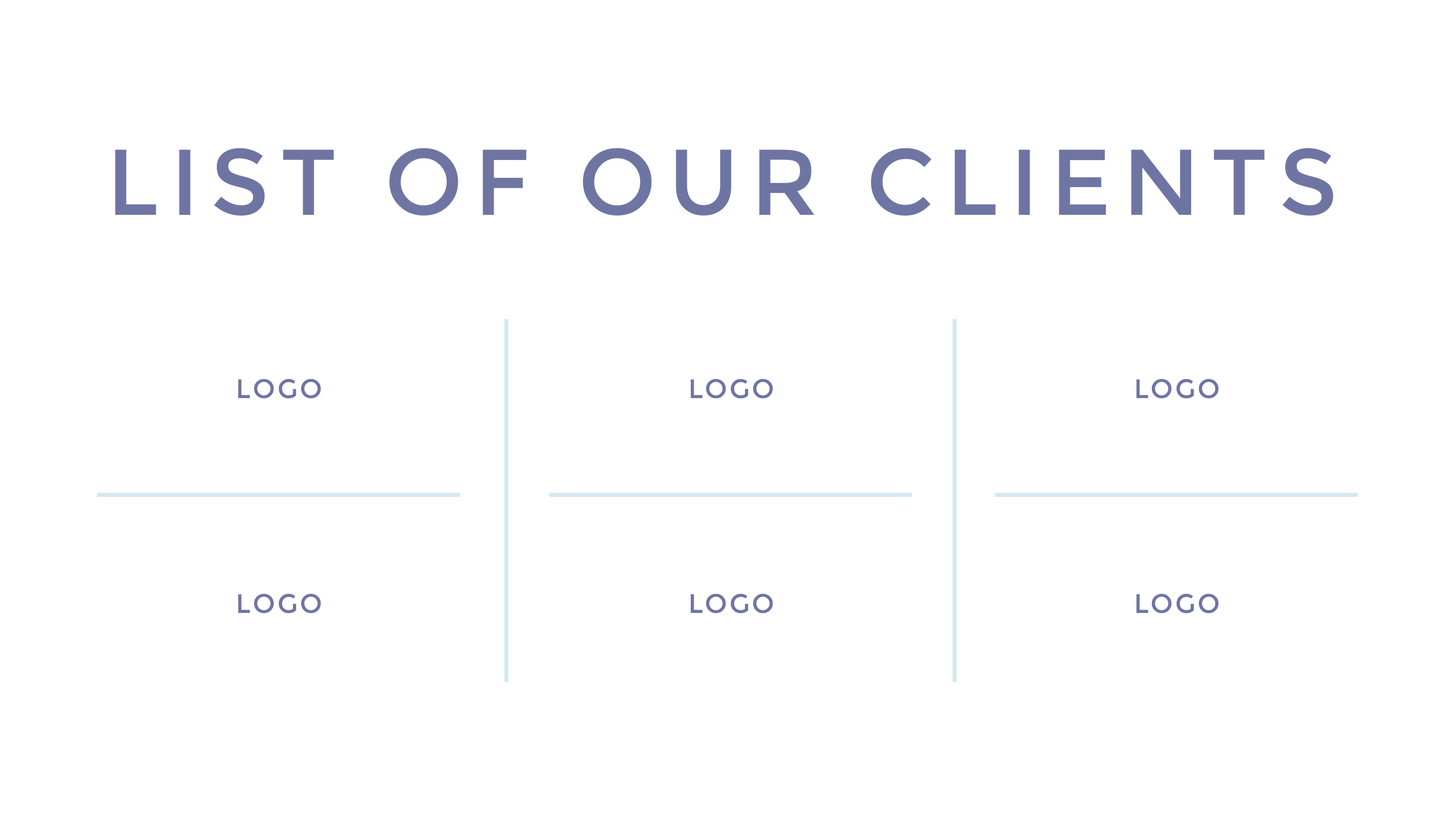
<style>
.page{position:relative;width:1455px;height:819px;background:#ffffff}
.page>*{position:absolute;margin:0}
.t1{font:93.2px "Montserrat-Regular";letter-spacing:0.12em;color:#6f75a3}
.t2{font:26.7px "Montserrat-Regular";letter-spacing:0.08em;color:#6f75a3}
</style>
<div class="page">
<p class="t1" style="left:115px;top:148px;width:1219px;height:68px">LIST OF OUR CLIENTS</p>
<p class="t2" style="left:238px;top:379px;width:83px;height:20px">LOGO</p>
<p class="t2" style="left:691px;top:379px;width:82px;height:20px">LOGO</p>
<p class="t2" style="left:1137px;top:379px;width:82px;height:20px">LOGO</p>
<p class="t2" style="left:238px;top:594px;width:83px;height:20px">LOGO</p>
<p class="t2" style="left:691px;top:594px;width:82px;height:20px">LOGO</p>
<p class="t2" style="left:1137px;top:594px;width:82px;height:20px">LOGO</p>
</div>
